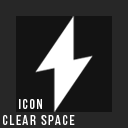
<style>
.page{position:relative;width:128px;height:128px;background:#131313}
.page>*{position:absolute;margin:0}
.t1{font:14px "BebasNeueRegular";letter-spacing:0.12em;color:#ffffff}
</style>
<div class="page">
<p class="t1" style="left:19px;top:99px;width:23px;height:10px">Icon</p>
<p class="t1" style="left:3px;top:115px;width:72px;height:10px">Clear space</p>
</div>
